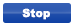
<style>
.page{position:relative;width:75px;height:25px;background:#ffffff}
.page>*{position:absolute;margin:0}
.t1{font:11.2px "Arial-Black";color:#ffffff}
</style>
<div class="page">
<p class="t1" style="left:22px;top:8px;width:28px;height:12px">Stop</p>
</div>
